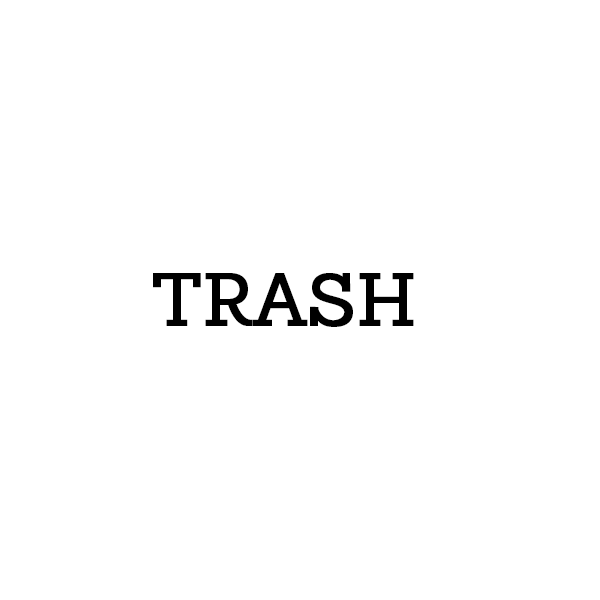
<style>
.page{position:relative;width:600px;height:600px;background:#ffffff}
.page>*{position:absolute;margin:0}
.t1{font:72px "SanchezSlab";color:#000000;text-transform:uppercase;font-weight:bold}
</style>
<div class="page">
<p class="t1" style="left:153px;top:273px;width:261px;height:54px">Trash</p>
</div>
